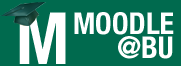
<style>
.page{position:relative;width:181px;height:66px;background:#006a4e}
.page>*{position:absolute;margin:0}
.t1{font:72px "HelveticaNeueLTPro-BdCn";color:#ffffff}
.t2{font:30px "HelveticaNeueLTPro-BdCn";color:#ffffff}
</style>
<div class="page">
<p class="t1" style="left:19px;top:12px;width:47px;height:52px">M</p>
<p class="t2" style="left:74px;top:12px;width:100px;height:23px">MOODLE</p>
<p class="t2" style="left:118px;top:36px;width:55px;height:23px">@BU</p>
</div>
